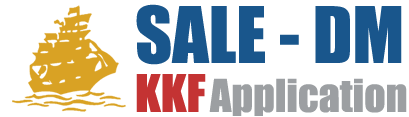
<style>
.page{position:relative;width:409px;height:117px;background:#ffffff}
.page>*{position:absolute;margin:0}
.t1{font:72px "Impact";color:#19568c}
.t2{font:48px "Impact";color:#c43333}
.t3{font:42px "Impact";color:#9c9fa2}
</style>
<div class="page">
<p class="t1" style="left:136px;top:4px;width:266px;height:61px">SALE - DM</p>
<p class="t2" style="left:136px;top:74px;width:70px;height:38px">KKF</p>
<p class="t3" style="left:209px;top:78px;width:198px;height:38px">Application</p>
</div>
